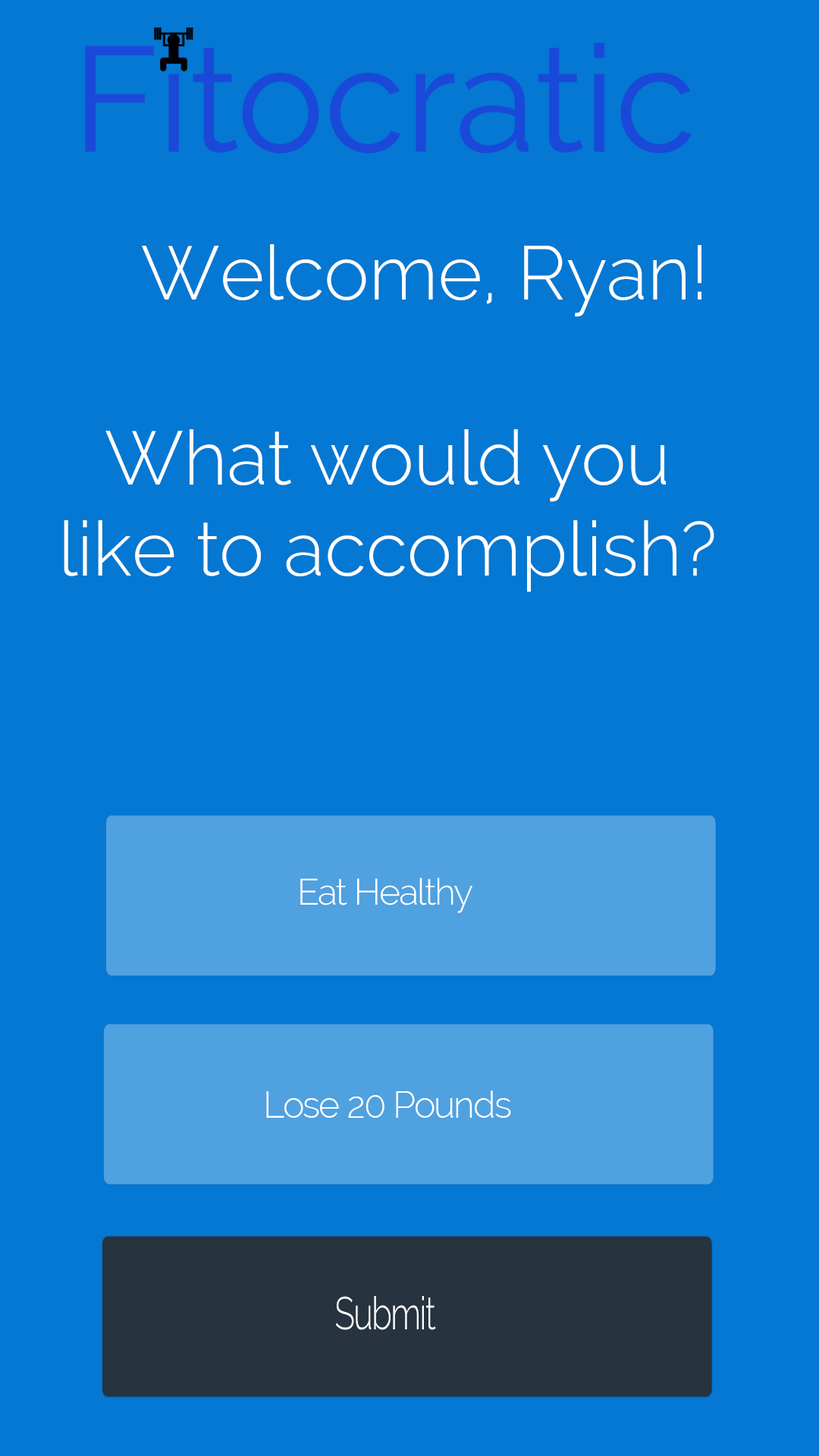
<style>
.page{position:relative;width:819px;height:1456px;background:#0478d2}
.page>*{position:absolute;margin:0}
.t1{font:75.8px "Raleway-Light";color:#ffffff}
.t2{font:36.4px "Raleway-Light";letter-spacing:-0.04em;color:#ffffff}
.t3{font:45.5px "Raleway-Light";letter-spacing:-0.04em;color:#ffffff;scale:0.73 1}
</style>
<div class="page">
<p class="t1" style="left:142px;top:244px;width:559px;height:73px">Welcome, Ryan!</p>
<p class="t1" style="left:64px;top:429px;width:650px;height:163px;text-align:center">What would you<br>like to accomplish?</p>
<p class="t2" style="left:300px;top:877px;width:172px;height:36px">Eat Healthy</p>
<p class="t2" style="left:266px;top:1090px;width:245px;height:28px">Lose 20 Pounds</p>
<p class="t3" style="left:336px;top:1296px;width:100px;height:34px">Submit</p>
</div>
